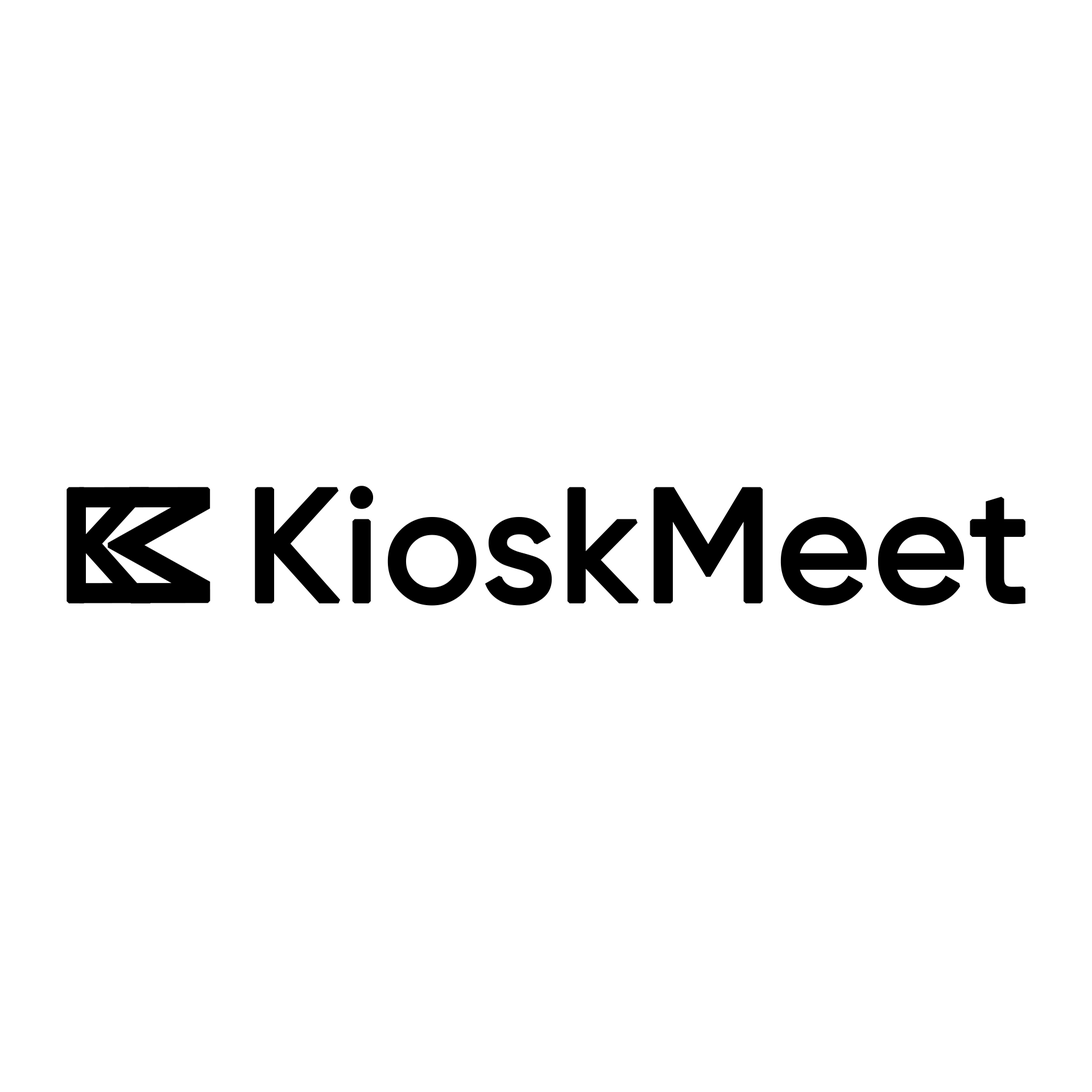
<style>
.page{position:relative;width:1092px;height:1092px;background:#ffffff}
.page>*{position:absolute;margin:0}
.t1{font:159.8px "Gilroy-Medium";color:#000000;font-weight:bold}
.t2{font:159.6px "Gilroy-Medium";color:#000000;font-weight:bold}
.t3{font:183.3px "Gilroy-Medium";color:#000000;font-weight:bold;scale:0.93 1}
</style>
<div class="page">
<p class="t1" style="left:255px;top:486px;width:770px;height:120px">KioskMeet</p>
<p class="t2" style="left:67px;top:487px;width:85px;height:116px">K</p>
<p class="t3" style="left:77px;top:487px;width:133px;height:116px;rotate:90deg">M</p>
</div>
